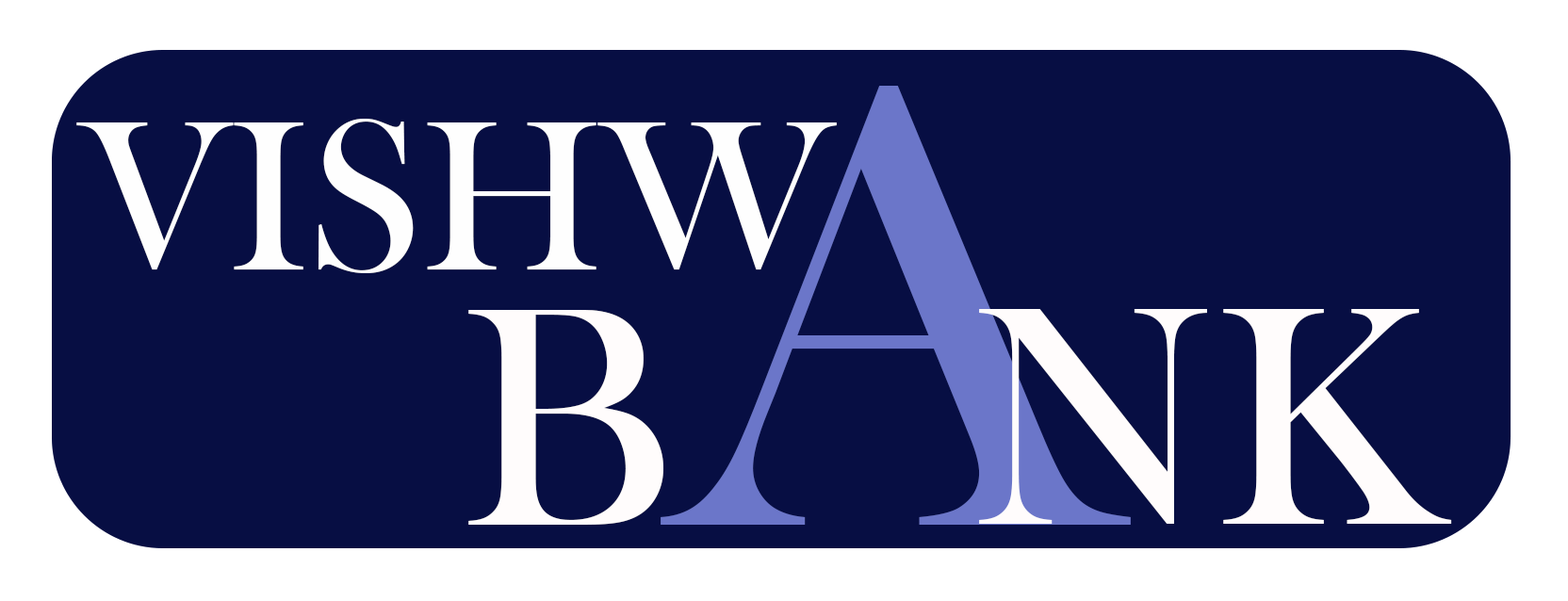
<style>
.page{position:relative;width:1568px;height:601px;background:#070e43}
.page>*{position:absolute;margin:0}
.t1{font:658.6px "BaskOldFace";color:#6b76c9}
.t2{font:220.3px "BaskOldFace";color:#fefefe}
.t3{font:322.7px "BaskOldFace";color:#fffcfc}
</style>
<div class="page">
<p class="t1" style="left:661px;top:86px;width:470px;height:439px">A</p>
<p class="t2" style="left:76px;top:119px;width:761px;height:154px">VISHW</p>
<p class="t3" style="left:468px;top:310px;width:195px;height:215px">B</p>
<p class="t3" style="left:979px;top:309px;width:473px;height:215px">NK</p>
</div>
